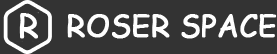
<style>
.page{position:relative;width:277px;height:54px;background:#333333}
.page>*{position:absolute;margin:0}
.t1{font:33px "ComicSansMS";color:#ffffff;font-weight:bold;scale:0.96 1}
.t2{font:29.6px "ComicSansMS";color:#fefefe;font-weight:bold}
</style>
<div class="page">
<p class="t1" style="left:19px;top:13px;width:19px;height:26px">R</p>
<p class="t2" style="left:67px;top:14px;width:210px;height:25px">ROSER SPACE</p>
</div>
